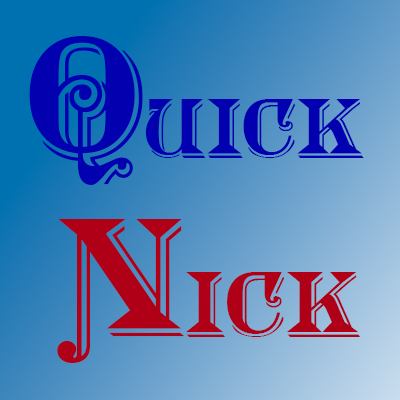
<style>
.page{position:relative;width:400px;height:400px}
.page>*{position:absolute;margin:0}
.t1{font:75px "MorganTwentyNine";color:#0300b0}
.t2{font:154.2px "MorganTwentyNine";color:#0300b0}
.t3{font:83.3px "MorganTwentyNine";color:#b00017}
.t4{font:154.2px "MorganTwentyNine";color:#b00017}
</style>
<div class="page">
<p class="t1" style="left:29px;top:36px;width:335px;height:149px"><span class="t2">Q</span>uick</p>
<p class="t3" style="left:57px;top:219px;width:304px;height:144px"><span class="t4">N</span>ick</p>
</div>
